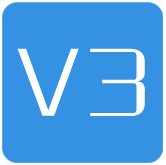
<style>
.page{position:relative;width:166px;height:165px;background:#3592e2}
.page>*{position:absolute;margin:0}
.t1{font:104px "FZZQJW--GB1-0";letter-spacing:0.05em;color:#ffffff}
</style>
<div class="page">
<p class="t1" style="left:17px;top:48px;width:128px;height:68px">V3</p>
</div>
